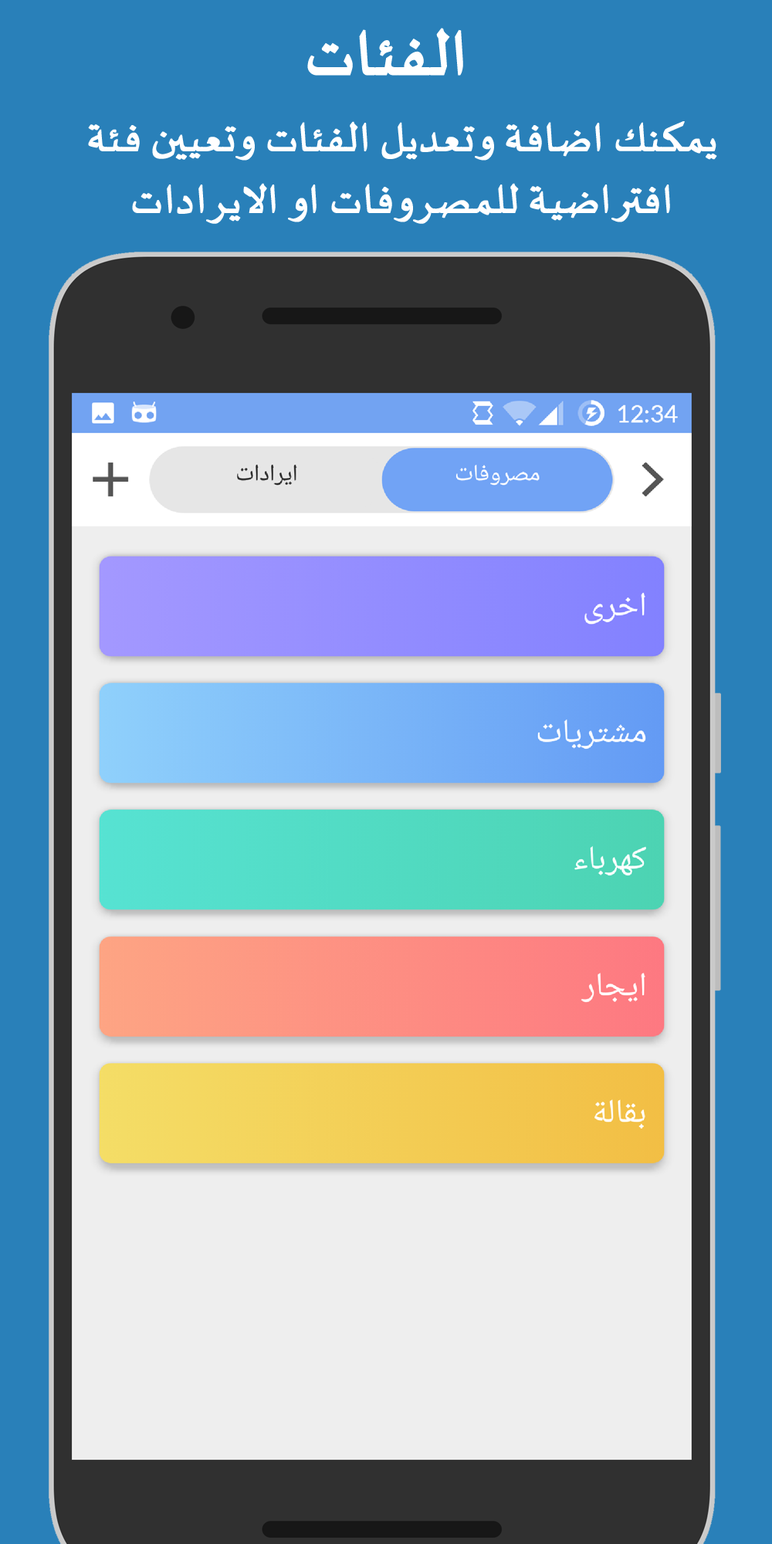
<style>
.page{position:relative;width:772px;height:1544px;background:#2980b9}
.page>*{position:absolute;margin:0}
.t1{font:80.3px "SakkalMajalla";color:#ffffff;font-weight:bold}
.t2{font:51.5px "SakkalMajalla";color:#ffffff;font-weight:bold}
</style>
<div class="page">
<p class="t1" style="left:307px;top:28px;width:156px;height:48px">الفئات</p>
<p class="t2" style="left:88px;top:121px;width:629px;height:103px;text-align:center">يمكنك اضافة وتعديل الفئات وتعيين فئة افتراضية للمصروفات او الايرادات</p>
</div>
